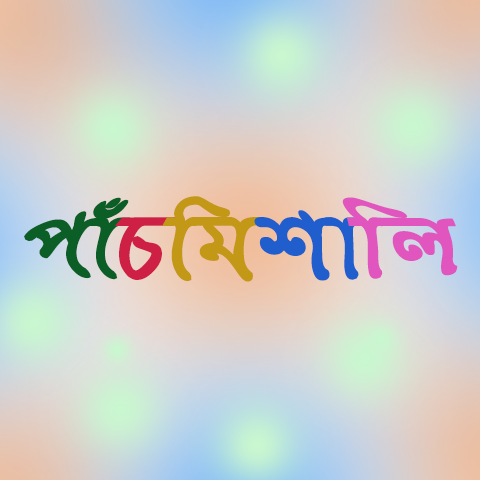
<style>
.page{position:relative;width:480px;height:480px}
.page>*{position:absolute;margin:0}
.t1{font:90px "KirtinashaMJ-Bold";color:#0a5e26}
.t2{font:90px "KirtinashaMJ-Bold";color:#ce2045}
.t3{font:90px "KirtinashaMJ-Bold";color:#c29816}
.t4{font:90px "KirtinashaMJ-Bold";color:#205ece}
.t5{font:90px "KirtinashaMJ-Bold";color:#e056be}
</style>
<div class="page">
<p class="t1" style="left:24px;top:196px;width:434px;height:86px">cvu<span class="t2">P</span><span class="t3">wg</span><span class="t4">kv</span><span class="t5">wj</span></p>
</div>
